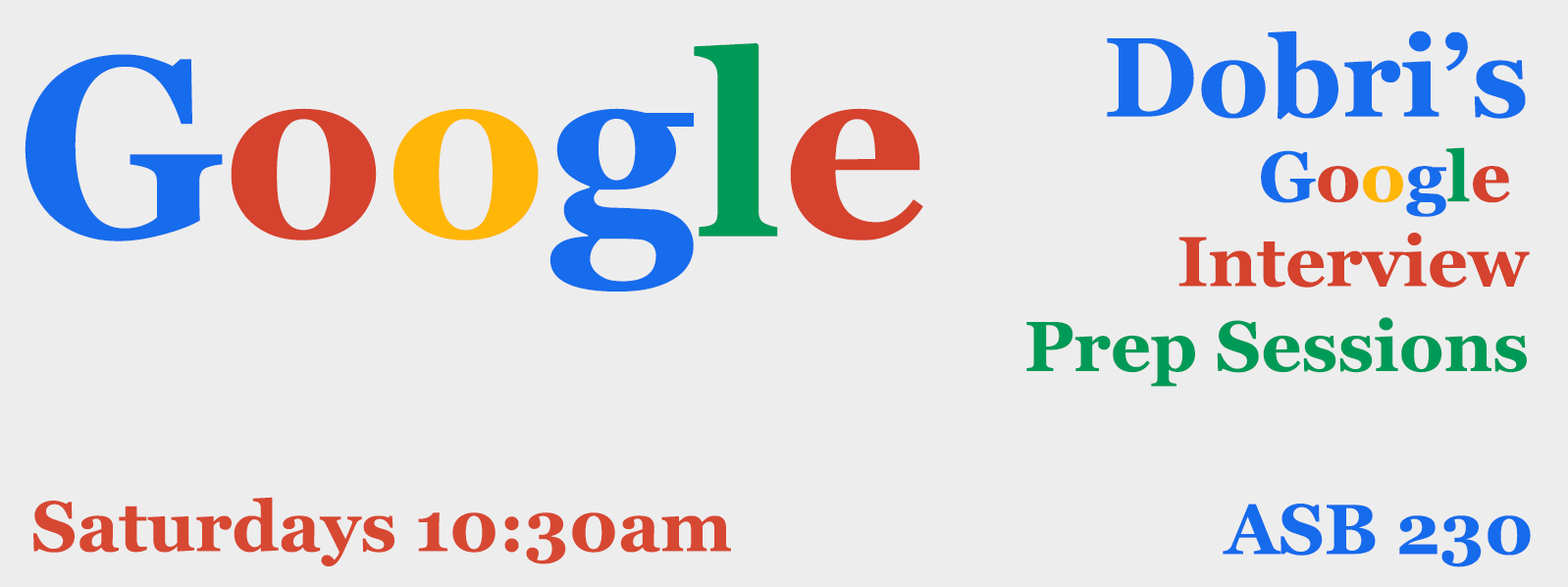
<style>
.page{position:relative;width:1568px;height:587px;background:#ededed}
.page>*{position:absolute;margin:0}
.t1{font:70.6px "Georgia-Bold";color:#009a57}
.t2{font:112.8px "Georgia-Bold";color:#176ced}
.t3{font:70.6px "Georgia-Bold";color:#166cec}
.t4{font:70.6px "Georgia-Bold";color:#d5422d}
.t5{font:70.6px "Georgia-Bold";color:#ffb606}
.t6{font:255.1px "Georgia-Bold";color:#166cec}
.t7{font:255.1px "Georgia-Bold";color:#d5422d}
.t8{font:255.1px "Georgia-Bold";color:#ffb606}
.t9{font:255.1px "Georgia-Bold";color:#009a57}
.t10{font:70.6px "Georgia-Bold";color:#d74832}
.t11{font:70.6px "Georgia-Bold";color:#166bec}
</style>
<div class="page">
<p class="t1" style="left:1026px;top:30px;width:504px;height:357px;text-align:right"><span class="t2">Dobri’s<br></span><span class="t3">G</span><span class="t4">o</span><span class="t5">o</span><span class="t3">g</span>l<span class="t4">e <br>Interview<br></span>Prep Sessions</p>
<p class="t6" style="left:25px;top:43px;width:898px;height:248px">G<span class="t7">o</span><span class="t8">o</span>g<span class="t9">l</span><span class="t7">e</span></p>
<p class="t10" style="left:33px;top:497px;width:698px;height:69px">Saturdays 10:30am</p>
<p class="t11" style="left:1223px;top:503px;width:308px;height:64px">ASB 230</p>
</div>
